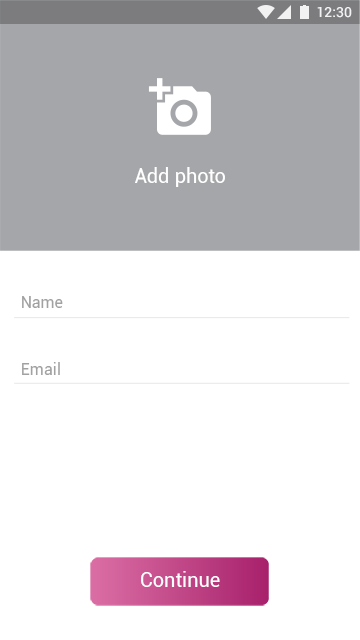
<style>
.page{position:relative;width:360px;height:640px;background:#ffffff}
.page>*{position:absolute;margin:0}
.t1{font:14px "Roboto-Medium";color:#ffffff}
.t2{font:20px "Roboto-Regular";letter-spacing:0.01em;color:#ffffff}
.t3{font:16px "Roboto-Regular";letter-spacing:0.01em;color:#a1a1a1}
.t4{font:20px "Roboto-Regular";color:#ffffff}
</style>
<div class="page">
<p class="t1" style="left:317px;top:7px;width:35px;height:11px">12:30</p>
<p class="t2" style="left:135px;top:167px;width:90px;height:20px">Add photo</p>
<p class="t3" style="left:22px;top:296px;width:41px;height:12px">Name</p>
<p class="t3" style="left:22px;top:362px;width:38px;height:13px">Email</p>
<p class="t4" style="left:141px;top:571px;width:79px;height:16px">Continue</p>
</div>
